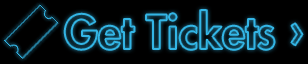
<style>
.page{position:relative;width:308px;height:64px;background:#000000}
.page>*{position:absolute;margin:0}
.t1{font:45.9px "FuturaStd-Heavy"}
</style>
<div class="page">
<p class="t1" style="left:64px;top:10px;width:239px;height:40px">Get Tickets ›</p>
</div>
